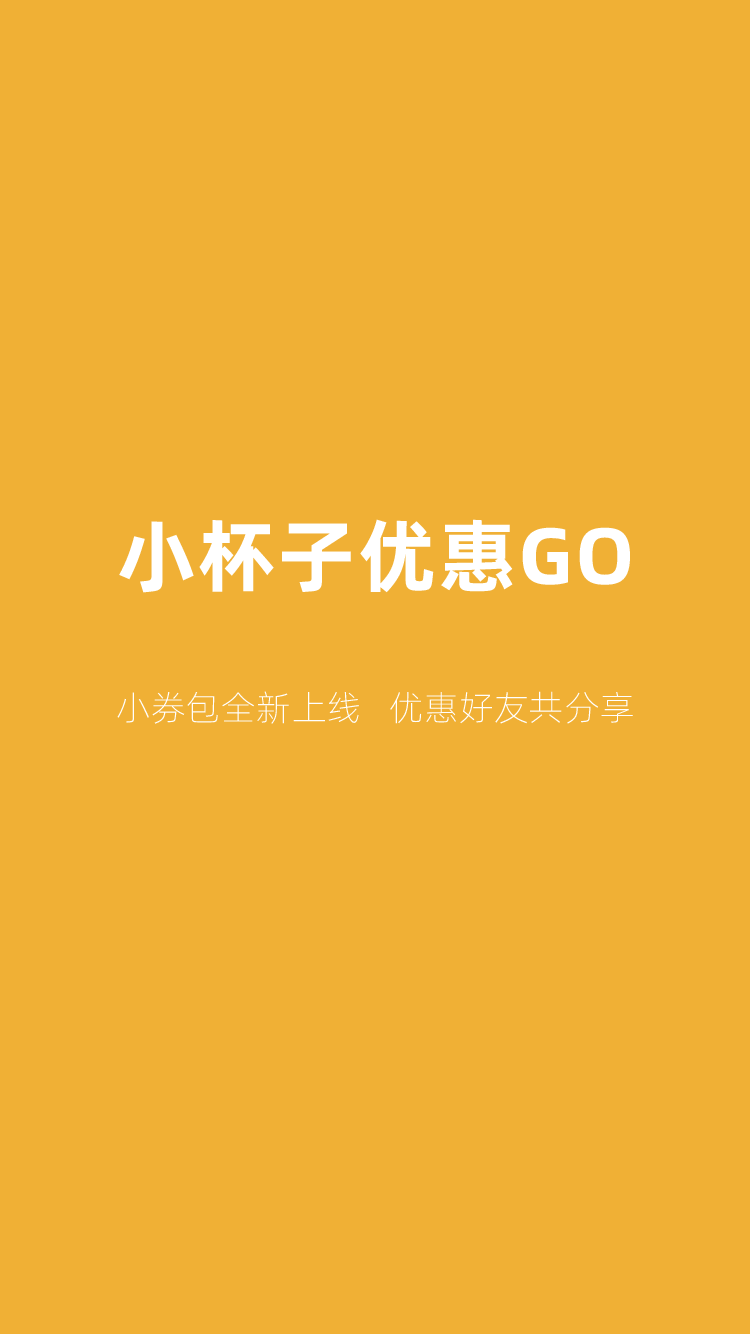
<style>
.page{position:relative;width:750px;height:1334px;background:#f0b035}
.page>*{position:absolute;margin:0}
.t1{font:80px "AlibabaPuHuiTiB";letter-spacing:0.02em;color:#ffffff}
.t2{font:35px "AlibabaPuHuiTiL";letter-spacing:0.02em;color:#ffffff}
</style>
<div class="page">
<p class="t1" style="left:119px;top:519px;width:511px;height:74px">小杯子优惠GO</p>
<p class="t2" style="left:117px;top:691px;width:516px;height:33px">小券包全新上线   优惠好友共分享</p>
</div>
